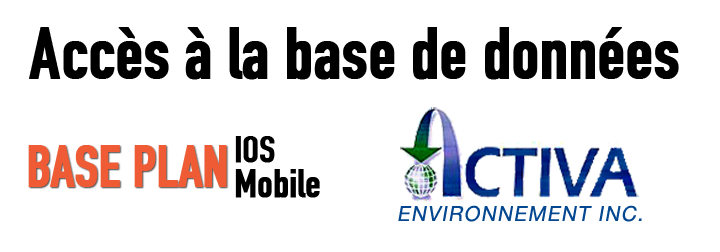
<style>
.page{position:relative;width:720px;height:252px;background:#ffffff}
.page>*{position:absolute;margin:0}
.t1{font:72px "DINEngschrift";letter-spacing:-0.01em;color:#000000;font-weight:bold}
.t2{font:37.5px "DINEngschrift";letter-spacing:-0.01em;color:#000000;font-weight:bold}
.t3{font:56.6px "DINEngschrift";letter-spacing:-0.01em;color:#ef5b34;font-weight:bold}
.t4{font:40.1px "DINEngschrift";letter-spacing:-0.01em;color:#000000;font-weight:bold}
.t5{font:20.7px "HelveticaNeue";letter-spacing:0.07em;color:#024790;font-style:italic}
</style>
<div class="page">
<p class="t1" style="left:29px;top:27px;width:650px;height:53px">Accès à la base de données</p>
<p class="t2" style="left:235px;top:136px;width:40px;height:27px">IOS</p>
<p class="t3" style="left:28px;top:145px;width:199px;height:42px">BASE PLAN</p>
<p class="t4" style="left:235px;top:169px;width:85px;height:29px">Mobile</p>
<p class="t5" style="left:398px;top:205px;width:244px;height:17px">ENVIRONNEMENT INC.</p>
</div>
